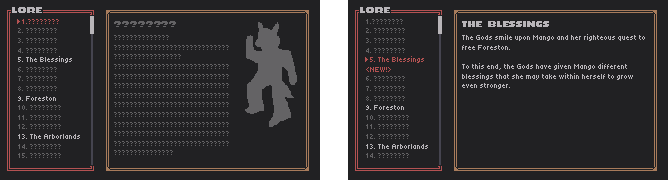
<style>
.page{position:relative;width:668px;height:180px;background:#212123}
.page>*{position:absolute;margin:0}
.t1{font:11px "NotJamChunky11";color:#b8b5b9}
.t2{font:8px "Tiny5-Regular";color:#646365}
.t3{font:8px "Tiny5-Regular";color:#b45252}
.t4{font:8px "Tiny5-Regular";color:#b8b5b9}
.t5{font:11px "NotJamChunky11";color:#646365}
</style>
<div class="page">
<p class="t1" style="left:12px;top:7px;width:30px;height:6px">LORE</p>
<p class="t1" style="left:360px;top:7px;width:30px;height:6px">LORE</p>
<p class="t2" style="left:18px;top:19px;width:62px;height:139px"><span class="t3">1.????????<br></span>2. ????????<br>3. ????????<br>4. ????????<br><span class="t4">5. The Blessings<br></span>6. ????????<br>7. ????????<br>8. ????????<br><span class="t4">9. Foreston<br></span>10. ????????<br>11. ????????<br>12. ????????<br><span class="t4">13. The Arborlands<br></span>14. ????????<br>15. ????????</p>
<p class="t5" style="left:114px;top:21px;width:62px;height:6px">????????</p>
<p class="t2" style="left:366px;top:19px;width:62px;height:139px">1.????????<br>2. ????????<br>3. ????????<br>4. ????????<br>  <span class="t3">5. The Blessings &lt;NEW!&gt;<br></span>6. ????????<br>7. ????????<br>8. ????????<br><span class="t4">9. Foreston<br></span>10. ????????<br>11. ????????<br>12. ????????<br><span class="t4">13. The Arborlands<br></span>14. ????????<br>15. ????????</p>
<p class="t1" style="left:462px;top:21px;width:87px;height:6px">THE BLESSINGS</p>
<p class="t2" style="left:114px;top:35px;width:115px;height:120px">?????????????? ?????????????????????????????????????????????? ????????????????????????????????????????????????????????????????????????????????????????????????????????????????????????????????????????????????????????????????????????????????????????????????????????????????????????????????????????????????????????????????????????????????????</p>
<p class="t4" style="left:462px;top:34px;width:183px;height:55px">The Gods smile upon Mango and her righteous quest to free Foreston.<br><br>To this end, the Gods have given Mango different blessings that she may take within herself to grow even stronger.</p>
</div>
